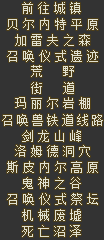
<style>
.page{position:relative;width:104px;height:240px;background:#333333}
.page>*{position:absolute;margin:0}
.t1{font:12px "SimSun";color:#e0e0d0}
</style>
<div class="page">
<p class="t1" style="left:22px;top:2px;width:59px;height:12px">前往城镇</p>
<p class="t1" style="left:7px;top:18px;width:91px;height:12px">贝尔内特平原</p>
<p class="t1" style="left:15px;top:34px;width:75px;height:12px">加雷夫之森</p>
<p class="t1" style="left:7px;top:50px;width:91px;height:12px">召唤仪式遗迹</p>
<p class="t1" style="left:31px;top:65px;width:43px;height:12px">荒野</p>
<p class="t1" style="left:31px;top:82px;width:43px;height:12px">街道</p>
<p class="t1" style="left:15px;top:97px;width:75px;height:12px">玛丽尔岩棚</p>
<p class="t1" style="left:2px;top:114px;width:101px;height:12px">召唤兽铁道线路</p>
<p class="t1" style="left:22px;top:130px;width:59px;height:12px">剑龙山峰</p>
<p class="t1" style="left:15px;top:145px;width:75px;height:12px">洛姆德洞穴</p>
<p class="t1" style="left:7px;top:161px;width:91px;height:12px">斯皮内尔高原</p>
<p class="t1" style="left:22px;top:177px;width:59px;height:12px">鬼神之谷</p>
<p class="t1" style="left:7px;top:193px;width:91px;height:12px">召唤仪式祭坛</p>
<p class="t1" style="left:22px;top:209px;width:59px;height:12px">机械废墟</p>
<p class="t1" style="left:22px;top:225px;width:59px;height:12px">死亡沼泽</p>
</div>
